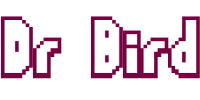
<style>
.page{position:relative;width:200px;height:100px;background:#ffffff}
.page>*{position:absolute;margin:0}
.t1{font:112.5px "FlappyBirdy";color:#7b0041}
</style>
<div class="page">
<p class="t1" style="left:1px;top:16px;width:199px;height:63px">Dr Bird</p>
</div>
